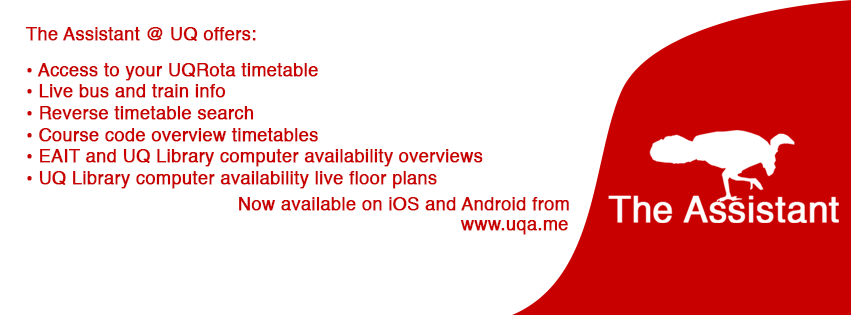
<style>
.page{position:relative;width:851px;height:315px;background:#ffffff}
.page>*{position:absolute;margin:0}
.t1{font:18px "Helvetica";color:#c90000;font-weight:bold}
</style>
<div class="page">
<p class="t1" style="left:25px;top:27px;width:231px;height:14px">The Assistant @ UQ offers:</p>
<p class="t1" style="left:27px;top:63px;width:456px;height:126px">• Access to your UQRota timetable<br>• Live bus and train info<br>• Reverse timetable search<br>• Course code overview timetables<br>• EAIT and UQ Library computer availability overviews<br>• UQ Library computer availability live floor plans</p>
<p class="t1" style="left:239px;top:197px;width:330px;height:14px">Now available on iOS and Android from</p>
<p class="t1" style="left:460px;top:220px;width:108px;height:15px">www.uqa.me</p>
</div>
